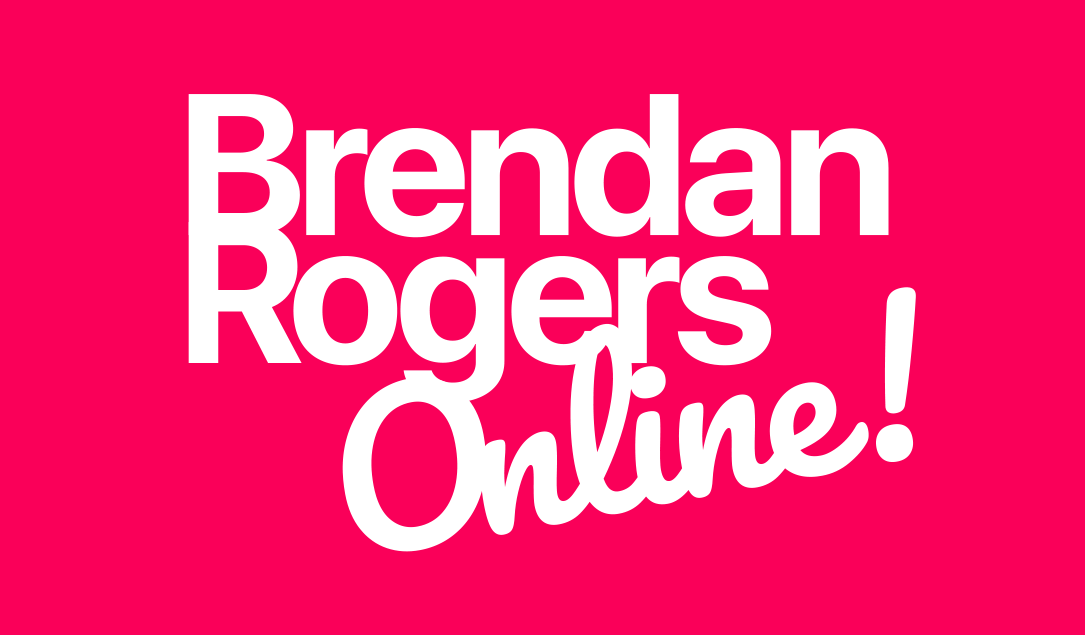
<style>
.page{position:relative;width:1085px;height:635px;background:#fa0059}
.page>*{position:absolute;margin:0}
.t1{font:200px/128px "SFProDisplay-Bold";letter-spacing:-0.04em;color:#ffffff}
.t2{font:200px/128px "SFProDisplay-Bold";letter-spacing:-0.08em;color:#ffffff}
.t3{font:200px "Pacifico-Regular";letter-spacing:-0.02em;color:#ffffff}
.t4{font:200px "Pacifico-Regular";letter-spacing:-0.12em;color:#ffffff}
</style>
<div class="page">
<p class="t1" style="left:188px;top:94px;width:701px;height:309px">Brendan<br><span class="t2">R</span>ogers</p>
<p class="t3" style="left:342px;top:287px;width:574px;height:265px;rotate:-11deg"><span class="t4">O</span>nline!</p>
</div>
